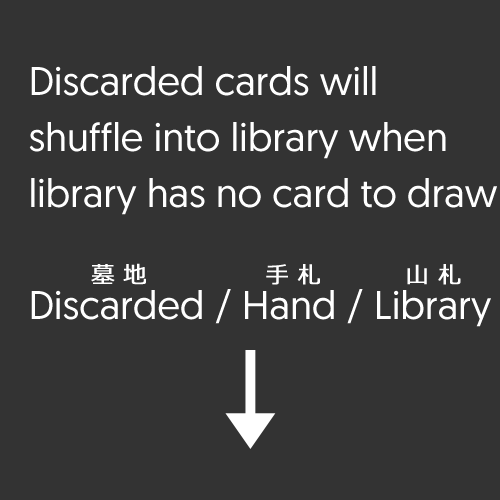
<style>
.page{position:relative;width:500px;height:500px;background:#333333}
.page>*{position:absolute;margin:0}
.t1{font:40px/56px "Geomanist-Regular";color:#ffffff}
.t2{font:23.1px "Meiryo";color:#ffffff;font-weight:bold}
</style>
<div class="page">
<p class="t1" style="left:29px;top:66px;width:468px;height:261px">Discarded cards will<br>shuffle into library when<br>library has no card to draw<br><br>Discarded / Hand / Library</p>
<p class="t2" style="left:91px;top:263px;width:370px;height:22px">墓 地              手 札          山 札</p>
</div>
